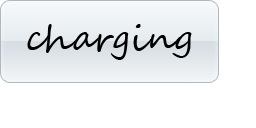
<style>
.page{position:relative;width:256px;height:128px;background:#ffffff}
.page>*{position:absolute;margin:0}
.t1{font:36px "SegoeScript";color:#000000}
</style>
<div class="page">
<p class="t1" style="left:27px;top:24px;width:165px;height:36px">charging</p>
</div>
